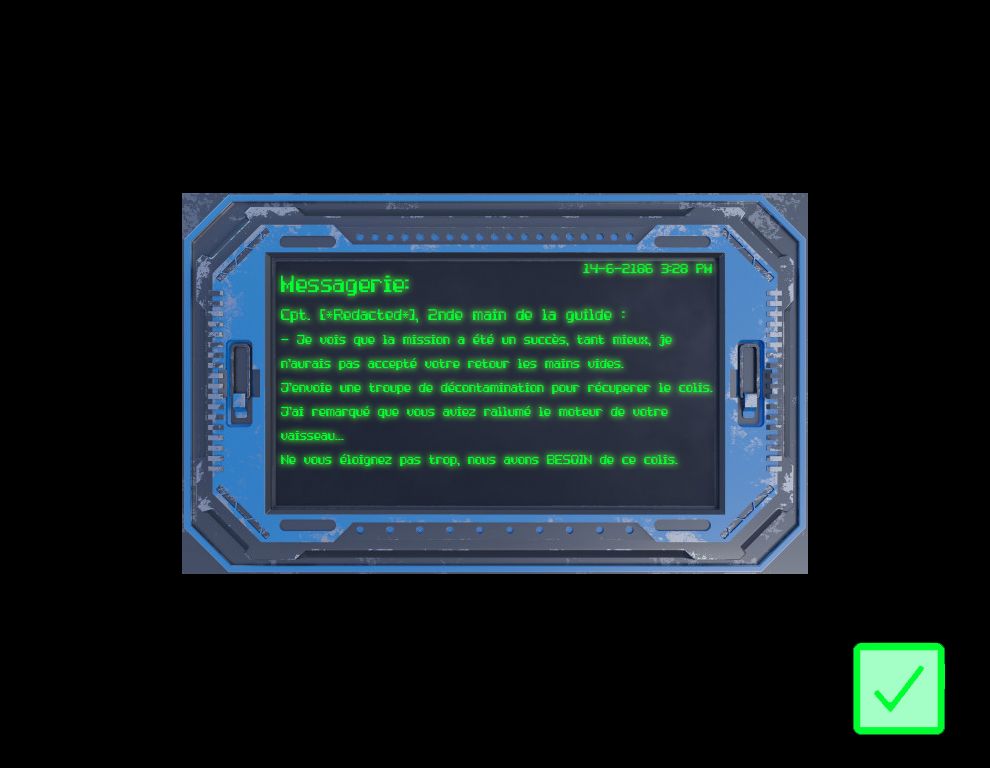
<style>
.page{position:relative;width:990px;height:768px;background:#000000}
.page>*{position:absolute;margin:0}
.t1{font:20px "ComputerPixel-7";color:#00ff30}
.t2{font:36px "ComputerPixel-7";color:#00ff30}
.t3{font:24px "ComputerPixel-7";color:#00ff30}
</style>
<div class="page">
<p class="t1" style="left:583px;top:263px;width:129px;height:11px">14-6-2186 3:28 PM</p>
<p class="t1" style="left:281px;top:275px;width:432px;height:192px"><span class="t2">Messagerie:<br></span><span class="t3">Cpt. [*Redacted*], 2nde main de la guilde :<br></span>- Je vois que la mission a été un succès, tant mieux, je<br>n’aurais pas accepté votre retour les mains vides.<br>J’envoie une troupe de décontamination pour récuperer le colis.<br>J’ai remarqué que vous aviez rallumé le moteur de votre <br>vaisseau... <br>Ne vous éloignez pas trop, nous avons BESOIN de ce colis.</p>
</div>
